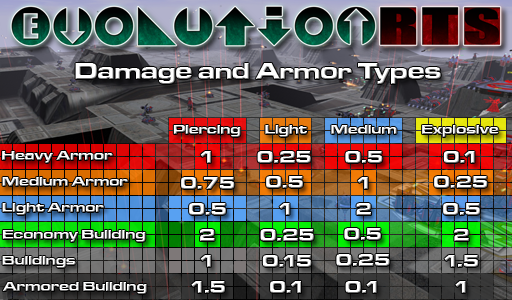
<style>
.page{position:relative;width:512px;height:300px}
.page>*{position:absolute;margin:0}
.t1{font:24px "MicrogrammaD-BoldExte";color:#ffffff}
.t2{font:14px "MicrogrammaD-BoldExte"}
.t3{font:18px "MicrogrammaD-BoldExte";color:#ffffff}
.t4{font:18px "MicrogrammaD-BoldExte";color:#fefefe}
</style>
<div class="page">
<p class="t1" style="left:75px;top:63px;width:366px;height:21px">Damage and Armor Types</p>
<p class="t2" style="left:173px;top:125px;width:68px;height:12px">Piercing</p>
<p class="t2" style="left:265px;top:125px;width:42px;height:12px">Light</p>
<p class="t2" style="left:331px;top:125px;width:66px;height:9px">Medium</p>
<p class="t2" style="left:422px;top:125px;width:77px;height:12px">Explosive</p>
<p class="t2" style="left:2px;top:151px;width:111px;height:12px">Heavy Armor</p>
<p class="t3" style="left:200px;top:151px;width:11px;height:12px">1</p>
<p class="t4" style="left:257px;top:151px;width:54px;height:12px">0.25</p>
<p class="t3" style="left:345px;top:151px;width:38px;height:12px">0.5</p>
<p class="t3" style="left:443px;top:151px;width:32px;height:12px">0.1</p>
<p class="t2" style="left:2px;top:177px;width:126px;height:9px">Medium Armor</p>
<p class="t3" style="left:181px;top:177px;width:54px;height:12px">0.75</p>
<p class="t3" style="left:266px;top:176px;width:37px;height:12px">0.5</p>
<p class="t3" style="left:357px;top:177px;width:11px;height:12px">1</p>
<p class="t3" style="left:434px;top:176px;width:54px;height:12px">0.25</p>
<p class="t2" style="left:2px;top:203px;width:102px;height:12px">Light Armor</p>
<p class="t3" style="left:189px;top:203px;width:37px;height:12px">0.5</p>
<p class="t3" style="left:279px;top:203px;width:11px;height:12px">1</p>
<p class="t3" style="left:356px;top:203px;width:15px;height:12px">2</p>
<p class="t3" style="left:443px;top:203px;width:37px;height:12px">0.5</p>
<p class="t2" style="left:2px;top:230px;width:144px;height:12px">Economy Building</p>
<p class="t3" style="left:200px;top:229px;width:15px;height:12px">2</p>
<p class="t3" style="left:260px;top:229px;width:54px;height:12px">0.25</p>
<p class="t3" style="left:344px;top:228px;width:37px;height:12px">0.5</p>
<p class="t3" style="left:454px;top:229px;width:15px;height:12px">2</p>
<p class="t2" style="left:2px;top:256px;width:74px;height:12px">Buildings</p>
<p class="t3" style="left:200px;top:255px;width:11px;height:12px">1</p>
<p class="t3" style="left:262px;top:255px;width:50px;height:12px">0.15</p>
<p class="t3" style="left:336px;top:254px;width:54px;height:12px">0.25</p>
<p class="t3" style="left:444px;top:255px;width:35px;height:12px">1.5</p>
<p class="t3" style="left:191px;top:281px;width:34px;height:12px">1.5</p>
<p class="t3" style="left:270px;top:281px;width:31px;height:12px">0.1</p>
<p class="t3" style="left:345px;top:281px;width:32px;height:12px">0.1</p>
<p class="t3" style="left:455px;top:281px;width:11px;height:12px">1</p>
<p class="t2" style="left:2px;top:282px;width:145px;height:12px">Armored Building</p>
</div>
